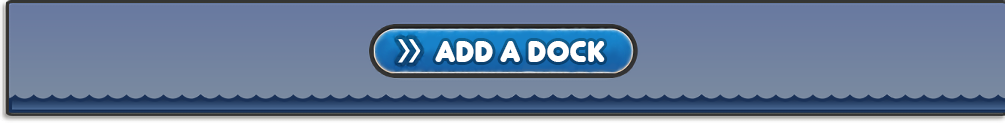
<style>
.page{position:relative;width:1005px;height:123px}
.page>*{position:absolute;margin:0}
.t1{font:30px "Junegull";color:#ffffff}
</style>
<div class="page">
<p class="t1" style="left:435px;top:41px;width:170px;height:21px">ADD A DOCK</p>
</div>
